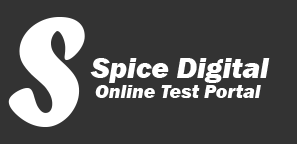
<style>
.page{position:relative;width:297px;height:144px;background:#333333}
.page>*{position:absolute;margin:0}
.t1{font:160px "ForteMT";color:#ffffff}
.t2{font:30px "FranklinGothic-HeavyItalic";color:#ffffff}
.t3{font:20px "FranklinGothic-HeavyItalic";color:#ffffff}
</style>
<div class="page">
<p class="t1" style="left:8px;top:17px;width:77px;height:110px">S</p>
<p class="t2" style="left:90px;top:58px;width:180px;height:25px">Spice Digital</p>
<p class="t3" style="left:95px;top:85px;width:166px;height:14px">Online Test Portal</p>
</div>
